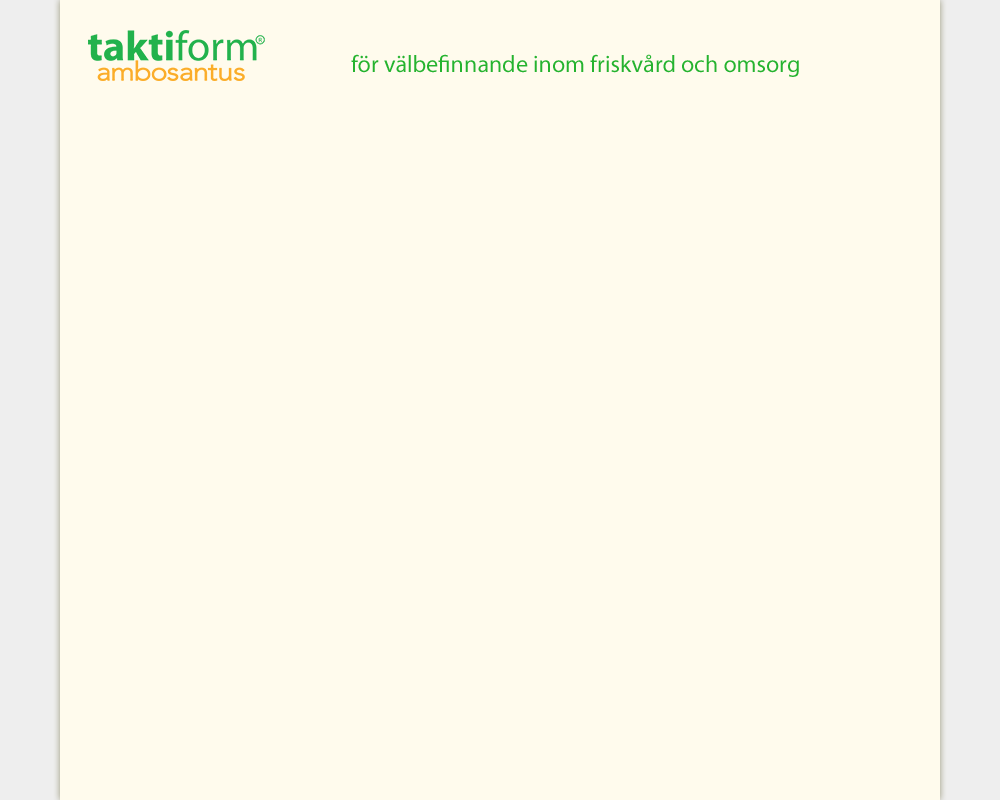
<style>
.page{position:relative;width:1000px;height:800px;background:#fffbed}
.page>*{position:absolute;margin:0}
.t1{font:24px "MyriadPro-Regular";color:#25b32f}
</style>
<div class="page">
<p class="t1" style="left:351px;top:54px;width:448px;height:23px">för välbefinnande inom friskvård och omsorg</p>
</div>
